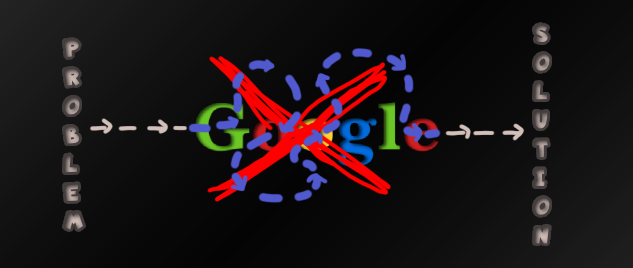
<style>
.page{position:relative;width:633px;height:268px}
.page>*{position:absolute;margin:0}
.t1{font:24px "LapsusPro-Bold"}
</style>
<div class="page">
<p class="t1" style="left:534px;top:24px;width:16px;height:220px">S<br>O<br>L<br>U<br>T<br>I<br>O<br>N</p>
<p class="t1" style="left:64px;top:40px;width:20px;height:190px">P<br>R<br>O<br>B<br>L<br>E<br>M</p>
</div>
